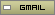
<style>
.page{position:relative;width:55px;height:15px}
.page>*{position:absolute;margin:0}
.t1{font:8px "BitDustTwo";color:#000000}
</style>
<div class="page">
<p class="t1" style="left:20px;top:5px;width:25px;height:5px">GMAIL</p>
</div>
